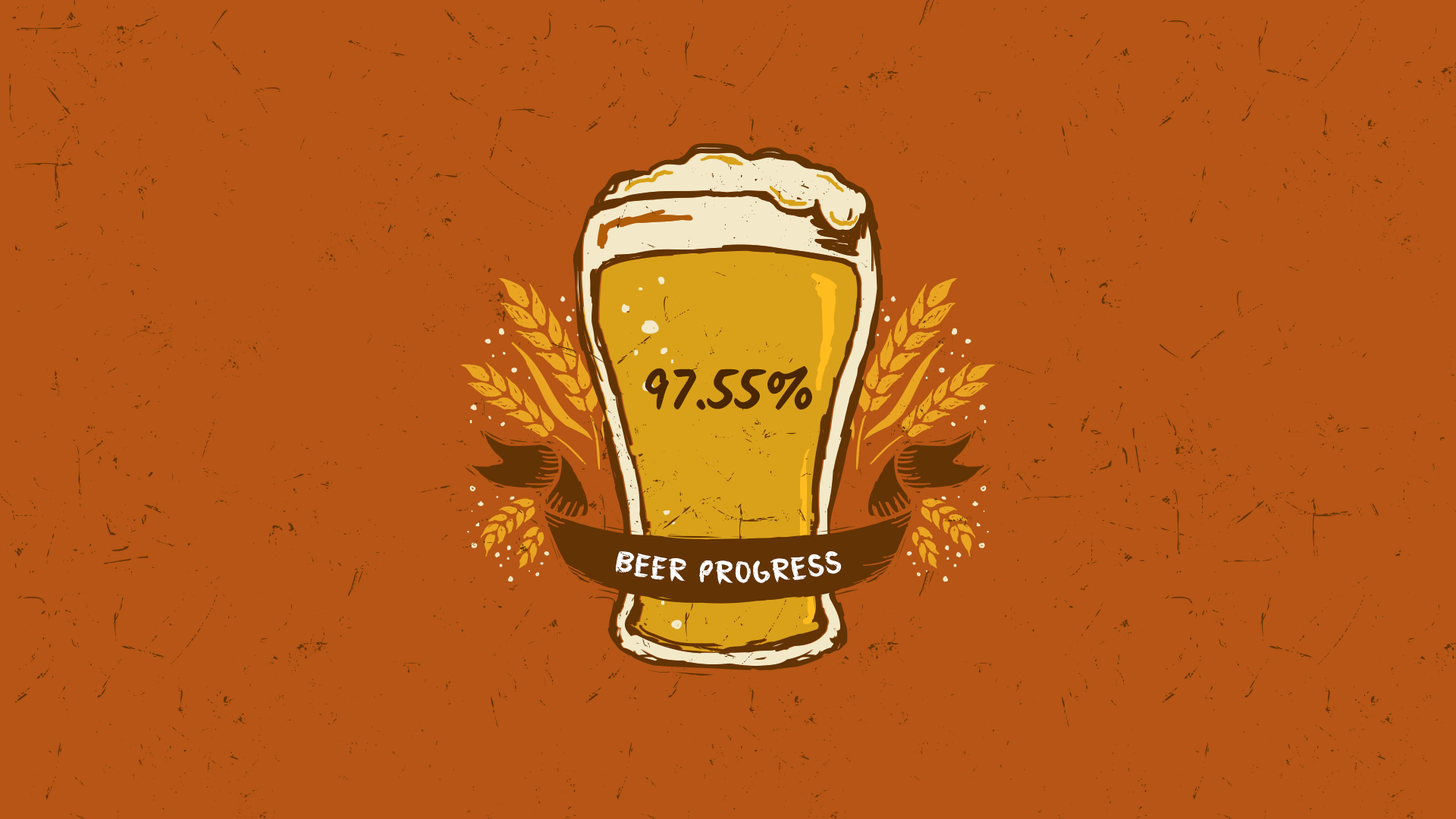
<style>
.page{position:relative;width:1456px;height:819px;background:#b65515}
.page>*{position:absolute;margin:0}
.t1{font:54.6px "Kalam-Bold";color:#4a2602}
.t2{font:36.4px "Plume";letter-spacing:0.05em;color:#ffffff}
</style>
<div class="page">
<p class="t1" style="left:645px;top:366px;width:167px;height:44px">97.55%</p>
<p class="t2" style="left:616px;top:551px;width:225px;height:34px">BEER PROGRESS</p>
</div>
